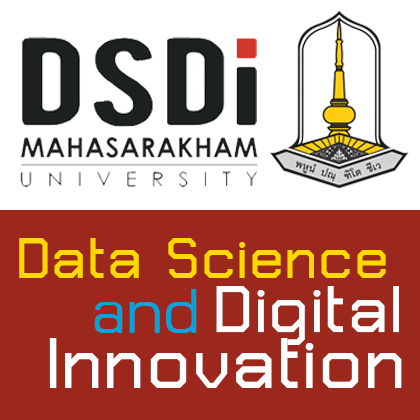
<style>
.page{position:relative;width:420px;height:420px;background:#9c271d}
.page>*{position:absolute;margin:0}
.t1{font:91.8px "THChakraPetch-Bold";color:#ffd800}
.t2{font:85.4px "DSNPreeCha";color:#00a5dd}
.t3{font:106.2px "THChakraPetch-Bold";color:#ffffff}
.t4{font:114.9px "THChakraPetch-Bold";color:#ffffff}
</style>
<div class="page">
<p class="t1" style="left:19px;top:238px;width:367px;height:40px">Data Science</p>
<p class="t2" style="left:94px;top:289px;width:103px;height:44px">and</p>
<p class="t3" style="left:216px;top:286px;width:183px;height:59px">Digital</p>
<p class="t4" style="left:49px;top:338px;width:353px;height:50px">Innovation</p>
</div>
